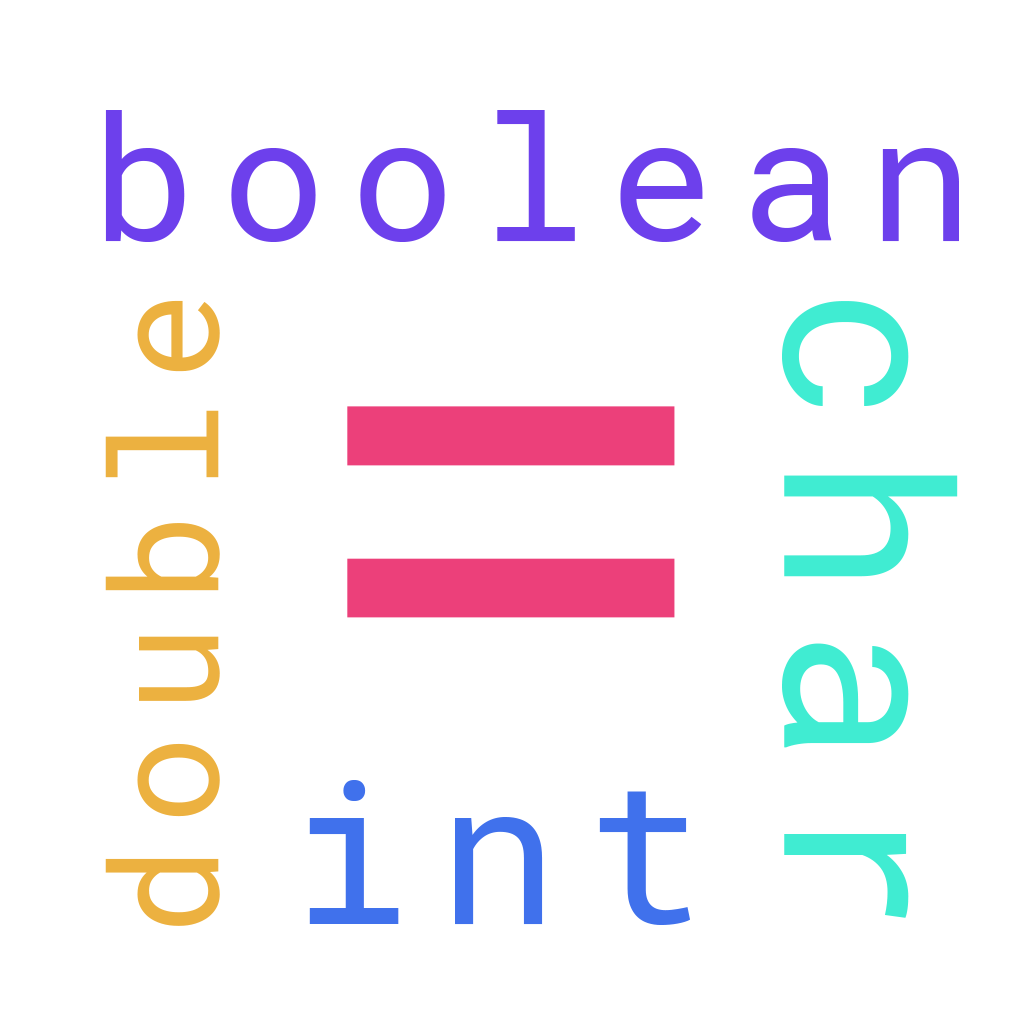
<style>
.page{position:relative;width:1024px;height:1024px;background:#ffffff}
.page>*{position:absolute;margin:0}
.t1{font:174.9px "RobotoMono-Regular";letter-spacing:0.14em;color:#6d40ec}
.t2{font:150px "RobotoMono-Regular";letter-spacing:0.14em;color:#ecb140}
.t3{font:230.5px "RobotoMono-Regular";letter-spacing:0.14em;color:#40ecd2}
.t4{font:750px "RobotoMono-Regular";letter-spacing:0.14em;color:#ec407a}
.t5{font:200px "RobotoMono-Regular";letter-spacing:0.14em;color:#4071ec}
</style>
<div class="page">
<p class="t1" style="left:105px;top:110px;width:854px;height:132px">boolean</p>
<p class="t2" style="left:105px;top:300px;width:115px;height:626px;rotate:-90deg">double</p>
<p class="t3" style="left:782px;top:301px;width:176px;height:617px;rotate:90deg">char</p>
<p class="t4" style="left:347px;top:406px;width:328px;height:212px">=</p>
<p class="t5" style="left:309px;top:780px;width:381px;height:145px">int</p>
</div>
